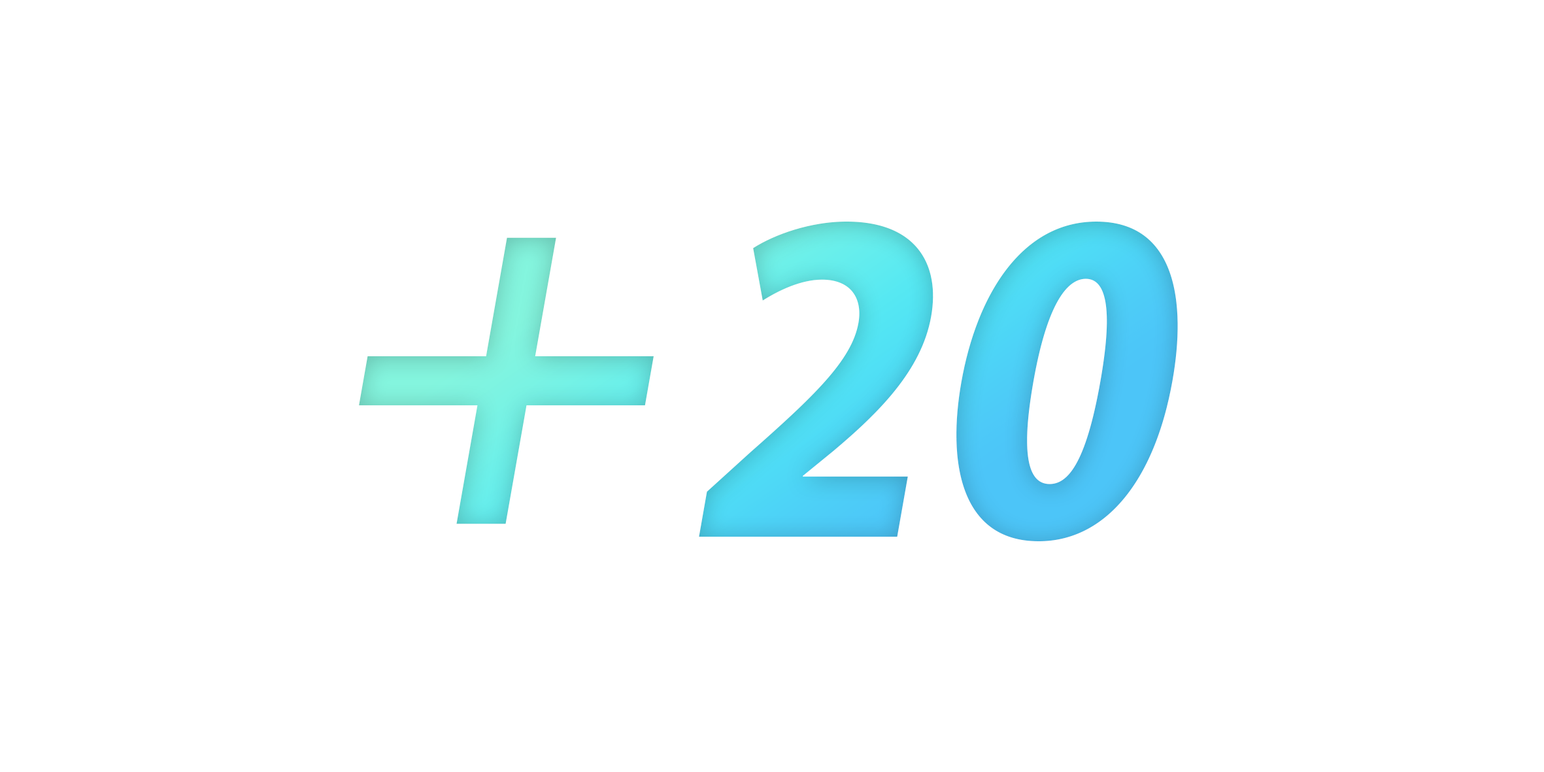
<style>
.page{position:relative;width:1544px;height:772px;background:#ffffff}
.page>*{position:absolute;margin:0}
.t1{font:408.6px "KozGoPro-Heavy";font-style:italic}
</style>
<div class="page">
<p class="t1" style="left:359px;top:222px;width:819px;height:319px">＋20</p>
</div>
